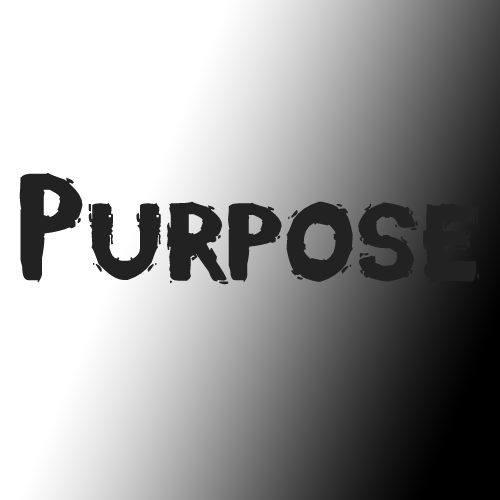
<style>
.page{position:relative;width:500px;height:500px;background:#ffffff}
.page>*{position:absolute;margin:0}
.t1{font:152.7px "DeadFontWalking";color:#222222}
</style>
<div class="page">
<p class="t1" style="left:19px;top:172px;width:461px;height:113px">Purpose</p>
</div>
